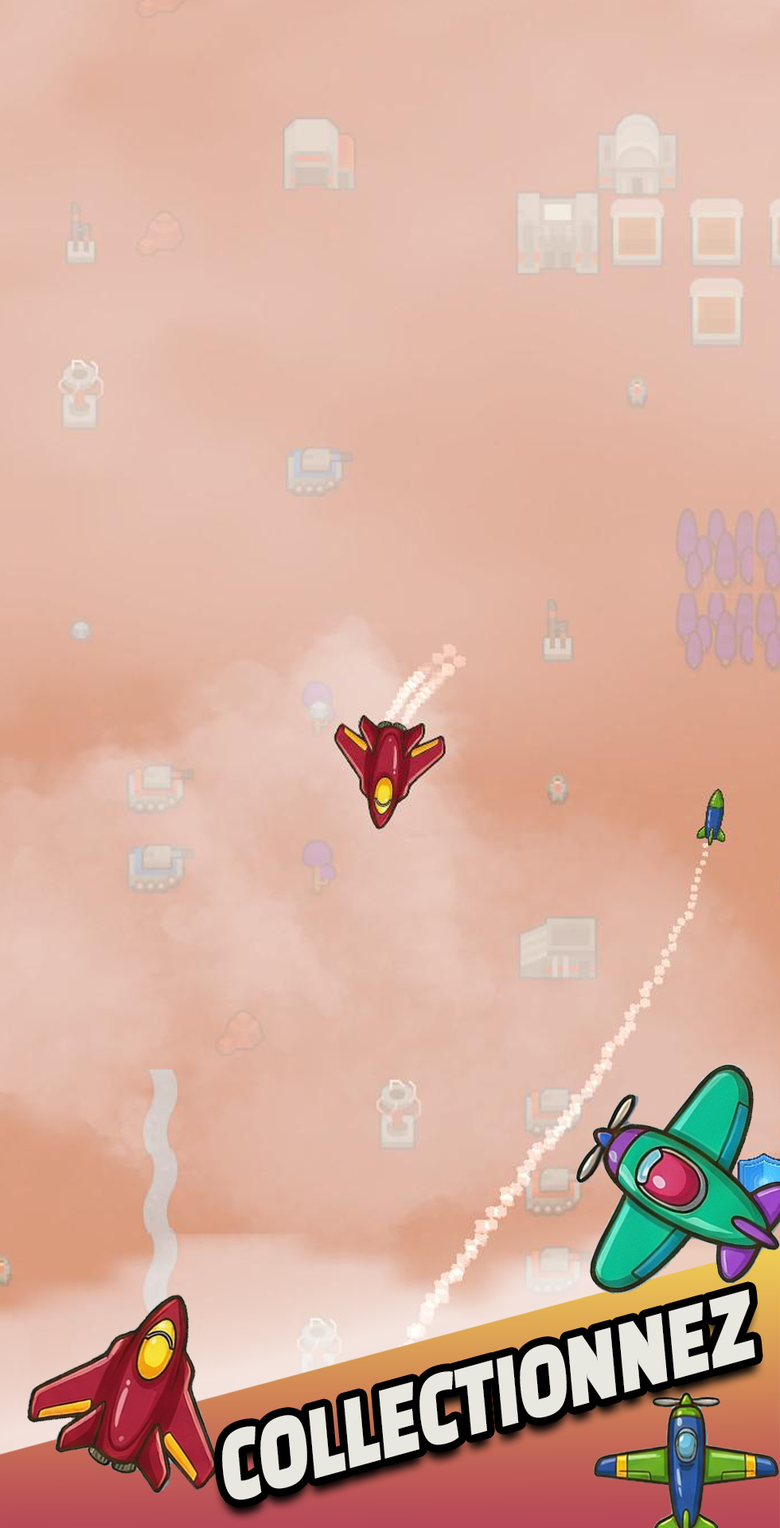
<style>
.page{position:relative;width:780px;height:1528px}
.page>*{position:absolute;margin:0}
.t1{font:108.4px "ChangaOne";color:#e8e8e0;scale:0.74 1}
</style>
<div class="page">
<p class="t1" style="left:222px;top:1290px;width:533px;height:211px;rotate:-15deg">COLLECTIONNEZ</p>
</div>
